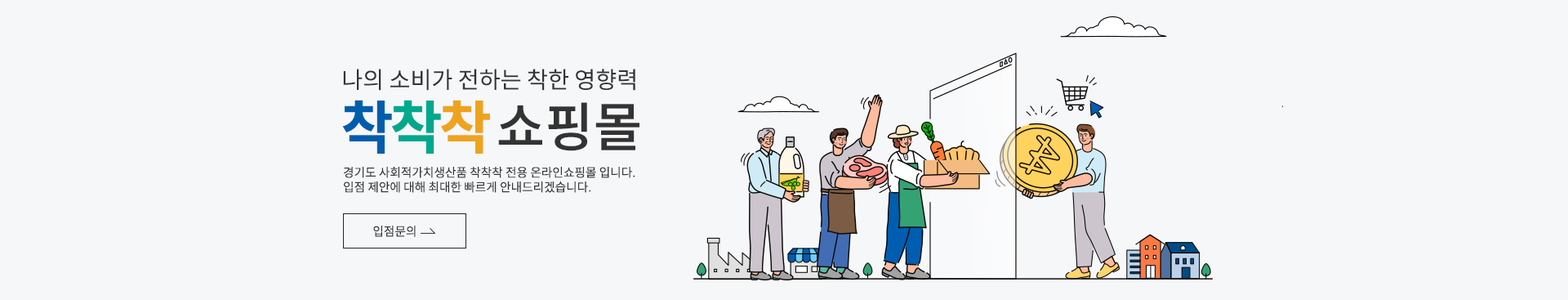
<style>
.page{position:relative;width:1568px;height:300px;background:#f6f7f9}
.page>*{position:absolute;margin:0}
.t1{font:23.1px "NotoSansCJKkr-DemiLight";color:#333333}
.t2{font:57.2px "NotoSansCJKkr-Bold";letter-spacing:-0.06em;color:#005dac}
.t3{font:57.2px "NotoSansCJKkr-Bold";letter-spacing:-0.06em;color:#00a88e}
.t4{font:57.2px "NotoSansCJKkr-Bold";letter-spacing:-0.06em;color:#eea31f}
.t5{font:52.9px "NotoSansCJKkr-Medium";color:#333333}
.t6{font:12.2px "NotoSansCJKkr-DemiLight";color:#333333}
</style>
<div class="page">
<p class="t1" style="left:343px;top:69px;width:292px;height:22px">나의 소비가 전하는 착한 영향력</p>
<p class="t2" style="left:342px;top:100px;width:148px;height:54px">착<span class="t3">착</span><span class="t4">착</span></p>
<p class="t5" style="left:498px;top:102px;width:141px;height:49px">쇼핑몰</p>
<p class="t6" style="left:344px;top:167px;width:291px;height:26px">경기도 사회적가치생산품 착착착 전용 온라인쇼핑몰 입니다.<br>입점 제안에 대해 최대한 빠르게 안내드리겠습니다.</p>
<p class="t6" style="left:373px;top:225px;width:43px;height:12px">입점문의</p>
</div>
